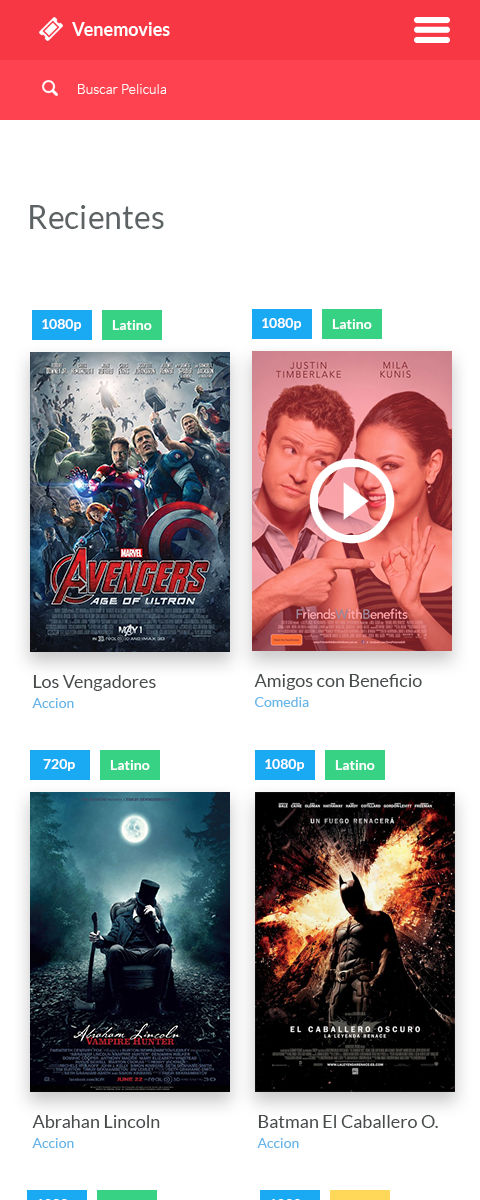
<style>
.page{position:relative;width:480px;height:1200px;background:#ffffff}
.page>*{position:absolute;margin:0}
.t1{font:18px "Lato-Bold";color:#ffffff}
.t2{font:14px "Lato-Light";color:#ffffff}
.t3{font:32px "Lato-Regular";color:#5d6264}
.t4{font:14px "Lato-Bold";color:#ffffff}
.t5{font:18px "Lato-Regular";color:#474b4c}
.t6{font:14px "Lato-Regular";color:#66b5e9}
</style>
<div class="page">
<p class="t1" style="left:72px;top:22px;width:98px;height:14px">Venemovies</p>
<p class="t2" style="left:78px;top:84px;width:88px;height:10px">Buscar Pelicula</p>
<p class="t3" style="left:30px;top:205px;width:134px;height:24px">Recientes</p>
<p class="t4" style="left:262px;top:318px;width:40px;height:12px">1080p</p>
<p class="t4" style="left:42px;top:319px;width:40px;height:12px">1080p</p>
<p class="t4" style="left:112px;top:320px;width:40px;height:10px">Latino</p>
<p class="t4" style="left:332px;top:319px;width:40px;height:10px">Latino</p>
<p class="t5" style="left:33px;top:675px;width:123px;height:16px">Los Vengadores</p>
<p class="t5" style="left:254px;top:674px;width:168px;height:16px">Amigos con Beneficio</p>
<p class="t6" style="left:32px;top:698px;width:42px;height:10px">Accion</p>
<p class="t6" style="left:255px;top:697px;width:54px;height:10px">Comedia</p>
<p class="t4" style="left:43px;top:759px;width:32px;height:12px">720p</p>
<p class="t4" style="left:110px;top:760px;width:40px;height:10px">Latino</p>
<p class="t4" style="left:265px;top:759px;width:40px;height:12px">1080p</p>
<p class="t4" style="left:335px;top:760px;width:40px;height:10px">Latino</p>
<p class="t5" style="left:32px;top:1115px;width:128px;height:13px">Abrahan Lincoln</p>
<p class="t5" style="left:258px;top:1115px;width:180px;height:13px">Batman El Caballero O.</p>
<p class="t6" style="left:32px;top:1138px;width:42px;height:10px">Accion</p>
<p class="t6" style="left:257px;top:1138px;width:42px;height:10px">Accion</p>
</div>
